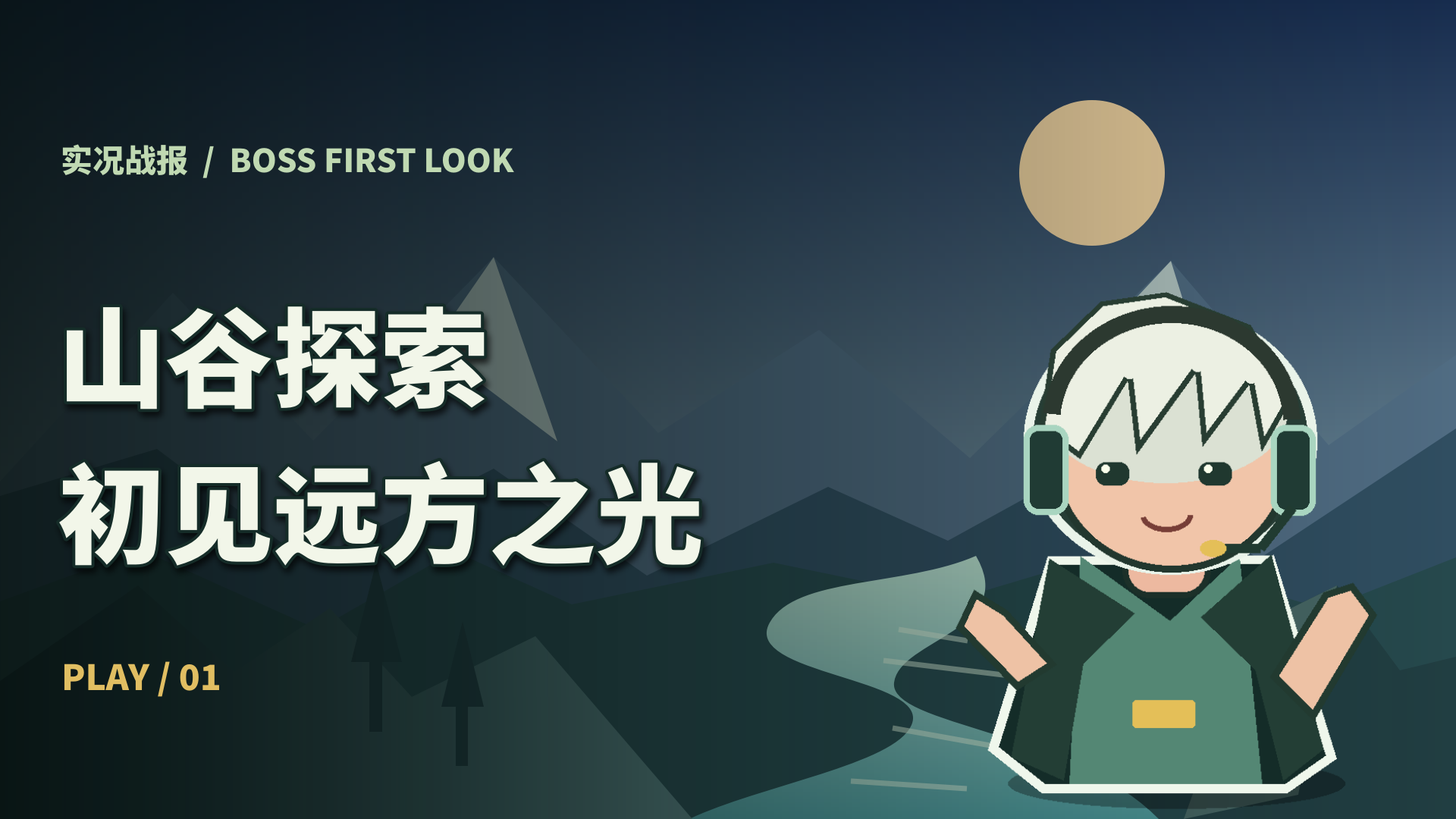
<style>
.page{position:relative;width:1456px;height:819px}
.page>*{position:absolute;margin:0}
.t1{font:31.8px "SourceHanSansSC-Heavy";color:#c0d9b2}
.t2{font:107.7px "SourceHanSansSC-Heavy";color:#f2f6e9}
.t3{font:34.9px "SourceHanSansSC-Heavy";color:#e1be62}
</style>
<div class="page">
<p class="t1" style="left:58px;top:132px;width:910px;height:52px">实况战报  /  BOSS FIRST LOOK</p>
<p class="t2" style="left:38px;top:254px;width:887px;height:352px">山谷探索<br>初见远方之光</p>
<p class="t3" style="left:58px;top:647px;width:835px;height:57px">PLAY / 01</p>
</div>
